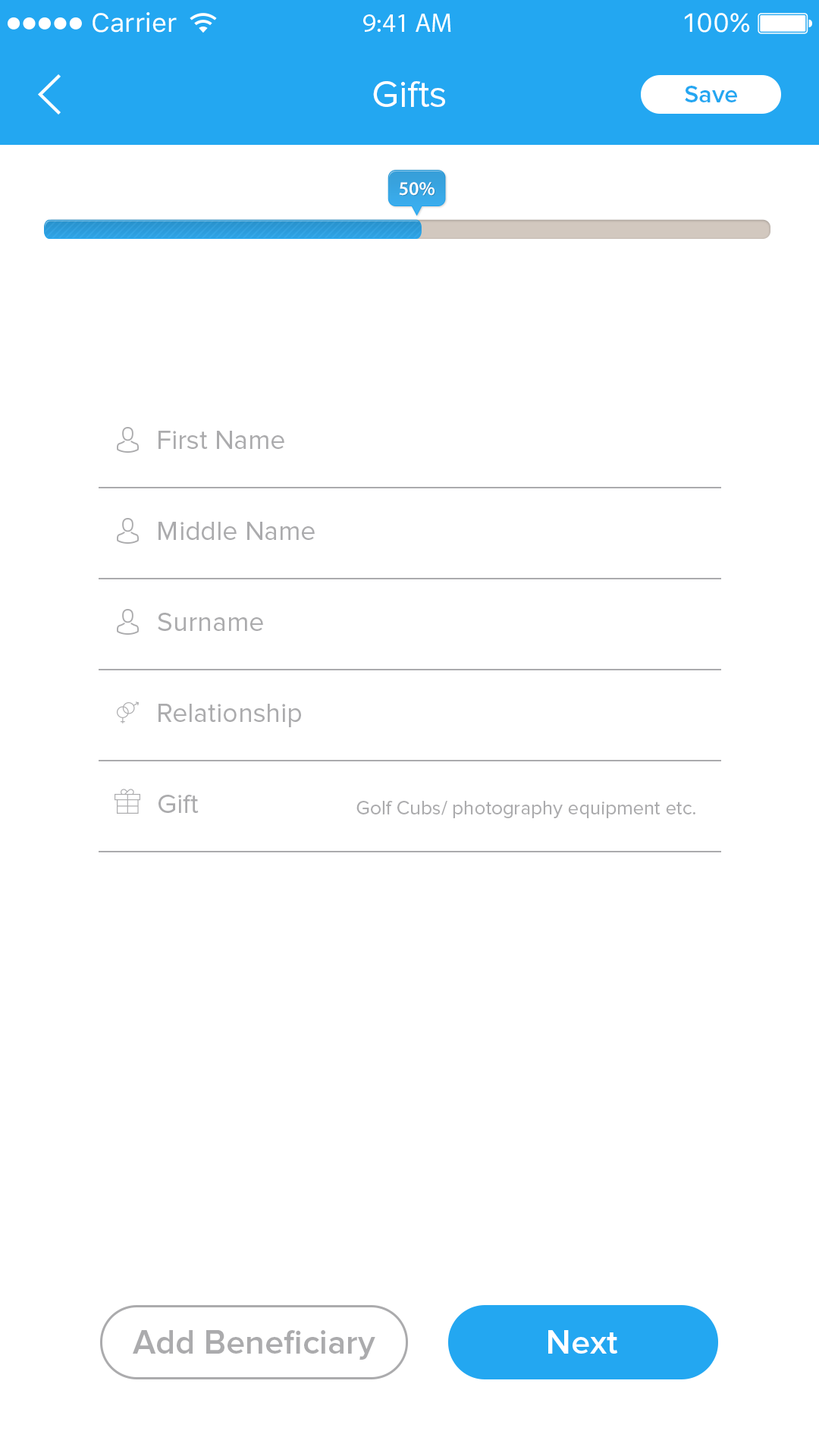
<style>
.page{position:relative;width:819px;height:1456px;background:#ffffff}
.page>*{position:absolute;margin:0}
.t1{font:38.1px "ProximaNova-Regular";color:#ffffff}
.t2{font:24.7px "ProximaNova-Semibold";color:#23a7f1}
.t3{font:19.2px "MyriadPro-Semibold";color:#ffffff}
.t4{font:27.3px "ProximaNova-Regular";color:#ababad}
.t5{font:19.7px "ProximaNova-Regular";color:#ababad}
.t6{font:34.1px "ProximaNova-Semibold";color:#ababad}
.t7{font:34.1px "ProximaNova-Semibold";color:#ffffff}
</style>
<div class="page">
<p class="t1" style="left:373px;top:81px;width:72px;height:26px">Gifts</p>
<p class="t2" style="left:685px;top:86px;width:52px;height:16px">Save</p>
<p class="t3" style="left:399px;top:182px;width:36px;height:14px">50%</p>
<p class="t4" style="left:158px;top:431px;width:126px;height:18px">First Name</p>
<p class="t4" style="left:158px;top:522px;width:157px;height:18px">Middle Name</p>
<p class="t4" style="left:158px;top:613px;width:105px;height:18px">Surname</p>
<p class="t4" style="left:158px;top:704px;width:143px;height:23px">Relationship</p>
<p class="t4" style="left:158px;top:795px;width:41px;height:18px">Gift</p>
<p class="t5" style="left:356px;top:801px;width:339px;height:17px">Golf Cubs/ photography equipment etc.</p>
<p class="t6" style="left:133px;top:1330px;width:242px;height:30px">Add Beneficiary</p>
<p class="t7" style="left:548px;top:1330px;width:69px;height:24px">Next</p>
</div>
